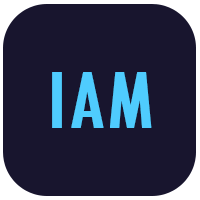
<style>
.page{position:relative;width:200px;height:200px;background:#18152e}
.page>*{position:absolute;margin:0}
.t1{font:87.5px "TwCenMT-Condensed";color:#4fccfe;font-weight:bold}
</style>
<div class="page">
<p class="t1" style="left:52px;top:72px;width:100px;height:56px">IAM</p>
</div>
